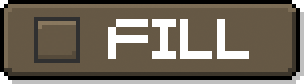
<style>
.page{position:relative;width:304px;height:84px;background:#655845}
.page>*{position:absolute;margin:0}
.t1{font:56px "7px4bus";letter-spacing:-0.05em;color:#ffffff}
</style>
<div class="page">
<p class="t1" style="left:108px;top:19px;width:141px;height:40px">FILL</p>
</div>
